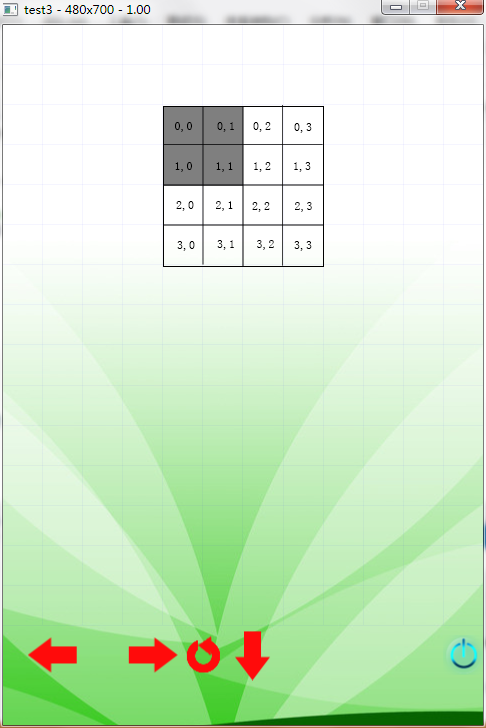
<style>
.page{position:relative;width:486px;height:728px;background:#ffffff}
.page>*{position:absolute;margin:0}
.t1{font:12px "SimSun";color:#000000}
</style>
<div class="page">
<p class="t1" style="left:175px;top:122px;width:17px;height:10px">0,0</p>
<p class="t1" style="left:217px;top:122px;width:17px;height:10px">0,1</p>
<p class="t1" style="left:253px;top:122px;width:18px;height:10px">0,2</p>
<p class="t1" style="left:294px;top:123px;width:18px;height:10px">0,3</p>
<p class="t1" style="left:175px;top:162px;width:17px;height:10px">1,0</p>
<p class="t1" style="left:216px;top:162px;width:17px;height:10px">1,1</p>
<p class="t1" style="left:254px;top:162px;width:17px;height:10px">1,2</p>
<p class="t1" style="left:294px;top:162px;width:17px;height:10px">1,3</p>
<p class="t1" style="left:176px;top:201px;width:18px;height:10px">2,0</p>
<p class="t1" style="left:216px;top:201px;width:17px;height:10px">2,1</p>
<p class="t1" style="left:252px;top:202px;width:18px;height:10px">2,2</p>
<p class="t1" style="left:295px;top:202px;width:17px;height:10px">2,3</p>
<p class="t1" style="left:177px;top:241px;width:18px;height:10px">3,0</p>
<p class="t1" style="left:217px;top:240px;width:17px;height:10px">3,1</p>
<p class="t1" style="left:257px;top:240px;width:17px;height:10px">3,2</p>
<p class="t1" style="left:294px;top:241px;width:18px;height:10px">3,3</p>
</div>
